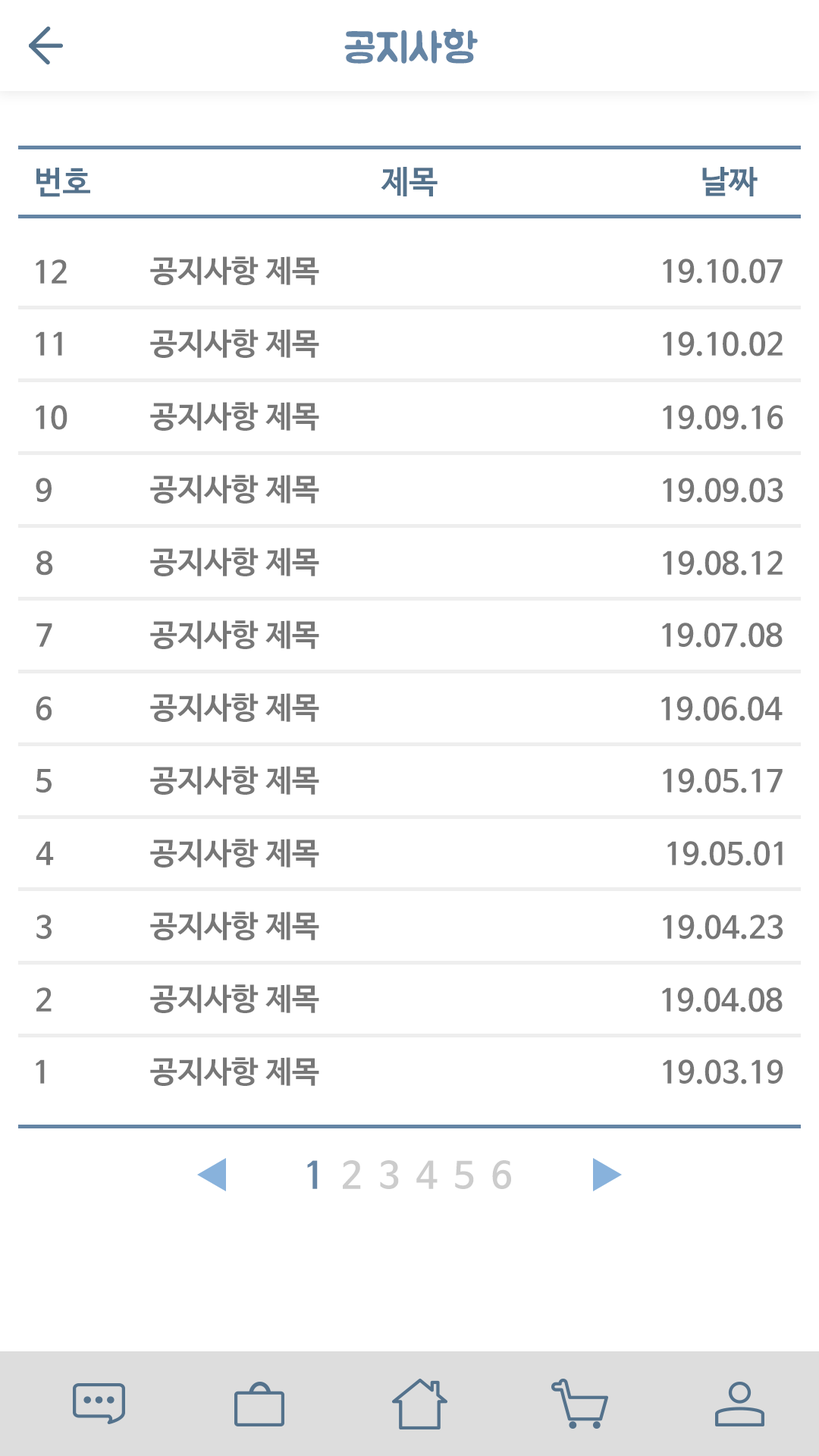
<style>
.page{position:relative;width:819px;height:1456px;background:#ffffff}
.page>*{position:absolute;margin:0}
.t1{font:40.9px "BMJUA";color:#6585a5}
.t2{font:31.8px "NanumBarunGothicBold";color:#54728c}
.t3{font:30.3px "NanumBarunGothicBold";color:#777777}
.t4{font:36.4px "NanumBarunGothicBold";color:#cccccc}
.t5{font:36.4px "NanumBarunGothicBold";color:#6585a5}
</style>
<div class="page">
<p class="t1" style="left:344px;top:28px;width:134px;height:36px">공지사항</p>
<p class="t2" style="left:36px;top:168px;width:54px;height:29px">번호</p>
<p class="t2" style="left:381px;top:167px;width:57px;height:29px">제목</p>
<p class="t2" style="left:702px;top:167px;width:56px;height:29px">날짜</p>
<p class="t3" style="left:150px;top:256px;width:169px;height:29px">공지사항 제목</p>
<p class="t3" style="left:36px;top:259px;width:31px;height:25px">12</p>
<p class="t3" style="left:663px;top:259px;width:120px;height:25px">19.10.07</p>
<p class="t3" style="left:150px;top:329px;width:169px;height:29px">공지사항 제목</p>
<p class="t3" style="left:36px;top:331px;width:26px;height:25px">11</p>
<p class="t3" style="left:663px;top:331px;width:120px;height:25px">19.10.02</p>
<p class="t3" style="left:150px;top:402px;width:169px;height:29px">공지사항 제목</p>
<p class="t3" style="left:36px;top:405px;width:31px;height:25px">10</p>
<p class="t3" style="left:663px;top:405px;width:120px;height:25px">19.09.16</p>
<p class="t3" style="left:36px;top:478px;width:16px;height:24px">9</p>
<p class="t3" style="left:150px;top:475px;width:169px;height:29px">공지사항 제목</p>
<p class="t3" style="left:663px;top:478px;width:120px;height:25px">19.09.03</p>
<p class="t3" style="left:36px;top:551px;width:17px;height:25px">8</p>
<p class="t3" style="left:150px;top:548px;width:169px;height:28px">공지사항 제목</p>
<p class="t3" style="left:663px;top:551px;width:120px;height:25px">19.08.12</p>
<p class="t3" style="left:36px;top:623px;width:16px;height:24px">7</p>
<p class="t3" style="left:150px;top:620px;width:169px;height:29px">공지사항 제목</p>
<p class="t3" style="left:662px;top:623px;width:121px;height:25px">19.07.08</p>
<p class="t3" style="left:36px;top:696px;width:16px;height:24px">6</p>
<p class="t3" style="left:150px;top:693px;width:169px;height:29px">공지사항 제목</p>
<p class="t3" style="left:661px;top:696px;width:122px;height:25px">19.06.04</p>
<p class="t3" style="left:36px;top:769px;width:16px;height:24px">5</p>
<p class="t3" style="left:150px;top:766px;width:169px;height:29px">공지사항 제목</p>
<p class="t3" style="left:663px;top:768px;width:120px;height:25px">19.05.17</p>
<p class="t3" style="left:36px;top:841px;width:18px;height:24px">4</p>
<p class="t3" style="left:150px;top:839px;width:169px;height:29px">공지사항 제목</p>
<p class="t3" style="left:667px;top:841px;width:116px;height:25px">19.05.01</p>
<p class="t3" style="left:36px;top:915px;width:16px;height:25px">3</p>
<p class="t3" style="left:150px;top:912px;width:169px;height:28px">공지사항 제목</p>
<p class="t3" style="left:663px;top:915px;width:120px;height:25px">19.04.23</p>
<p class="t3" style="left:36px;top:987px;width:16px;height:25px">2</p>
<p class="t3" style="left:150px;top:984px;width:169px;height:29px">공지사항 제목</p>
<p class="t3" style="left:662px;top:987px;width:121px;height:25px">19.04.08</p>
<p class="t3" style="left:36px;top:1059px;width:9px;height:25px">1</p>
<p class="t3" style="left:150px;top:1057px;width:169px;height:29px">공지사항 제목</p>
<p class="t3" style="left:663px;top:1059px;width:120px;height:25px">19.03.19</p>
<p class="t4" style="left:307px;top:1160px;width:204px;height:29px"><span class="t5">1</span>  2  3  4  5  6</p>
</div>
